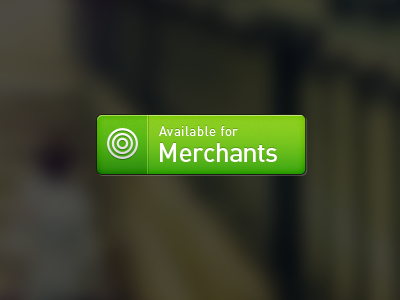
<style>
.page{position:relative;width:400px;height:300px}
.page>*{position:absolute;margin:0}
.t1{font:13.1px "DINPro-Regular";letter-spacing:0.04em;color:#ffffff}
.t2{font:26.1px "DINPro-Medium";letter-spacing:-0.02em;color:#ffffff}
</style>
<div class="page">
<p class="t1" style="left:159px;top:126px;width:79px;height:10px">Available for</p>
<p class="t2" style="left:160px;top:143px;width:117px;height:19px">Merchants</p>
</div>
